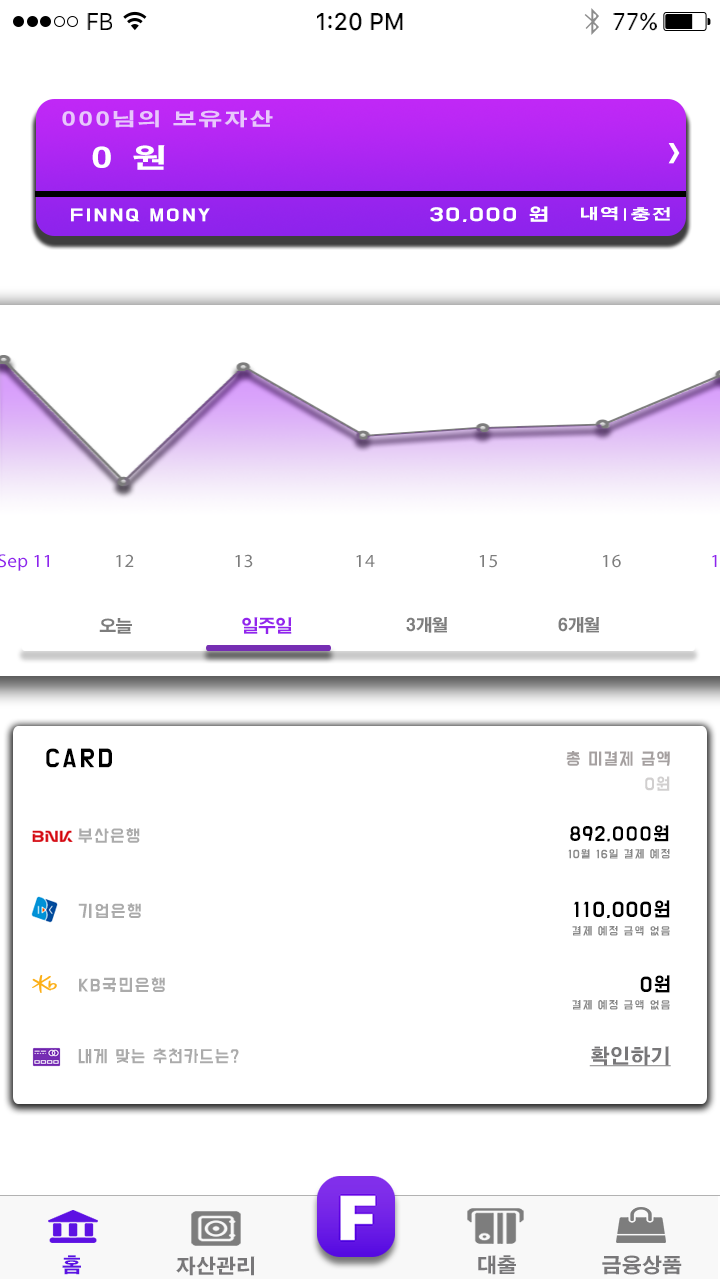
<style>
.page{position:relative;width:720px;height:1280px;background:#ffffff}
.page>*{position:absolute;margin:0}
.t1{font:24px "SFUIText-Regular";letter-spacing:-0.025em;color:#000000;scale:0.96 1}
.t2{font:24px "SFUIText-Medium";color:#000000;scale:0.96 1}
.t3{font:24px "SFUIText-Regular";color:#000000;scale:0.96 1}
.t4{font:18px "H2gtrE";letter-spacing:0.1em;color:#e9c6fc;scale:1.31 1}
.t5{font:27px "H2gtrE";letter-spacing:0.1em;color:#ffffff;scale:1.31 1}
.t6{font:22.2px "BMDoHyeon";letter-spacing:0.1em;color:#ffffff;scale:1.31 1}
.t7{font:15px "BMDoHyeon";letter-spacing:0.1em;color:#ffffff;scale:1.3 1}
.t8{font:16px "BMDoHyeon";letter-spacing:0.1em;color:#ffffff;scale:1.31 1}
.t9{font:14.5px "H2gtrE";letter-spacing:0.1em;color:#ffffff;scale:1.35 1}
.t10{font:18.5px "MyriadPro-Regular";letter-spacing:0.01em;color:#9023ed;scale:1.05 1}
.t11{font:18.5px "MyriadPro-Regular";letter-spacing:0.01em;color:#7d7d7d;scale:1.05 1}
.t12{font:18.5px "MyriadPro-Regular";letter-spacing:0.025em;color:#7d7d7d;scale:1.05 1}
.t13{font:17.9px "H2gtrE";letter-spacing:-0.05em;color:#9324ed}
.t14{font:17px "H2gtrE";letter-spacing:-0.05em;color:#7d7d7d}
.t15{font:22px "BMDoHyeon";letter-spacing:0.1em;color:#000000}
.t16{font:15px/25px "BMDoHyeon";letter-spacing:0.1em;color:#a5a0a0}
.t17{font:15px/25px "BMDoHyeon";letter-spacing:0.1em;color:#d1cfcf}
.t18{font:15px "BMDoHyeon";letter-spacing:0.1em;color:#ababab}
.t19{font:17px "BMDoHyeon";letter-spacing:0.1em;color:#000000}
.t20{font:10px "BMDoHyeon";letter-spacing:0.1em;color:#898989}
.t21{font:18px "BMDoHyeon";letter-spacing:0.1em;color:#000000}
.t22{font:20px "H2gtrE";letter-spacing:0.01em;color:#787779;text-decoration:underline}
.t23{font:20px "H2gtrE";letter-spacing:0.01em;color:#5d11e3}
.t24{font:20px "H2gtrE";letter-spacing:0.01em;color:#787779}
</style>
<div class="page">
<p class="t1" style="left:87px;top:13px;width:25px;height:17px">FB</p>
<p class="t2" style="left:317px;top:12px;width:86px;height:19px">1:20 PM</p>
<p class="t3" style="left:613px;top:12px;width:44px;height:19px">77%</p>
<p class="t4" style="left:62px;top:110px;width:211px;height:18px">000님의 보유자산</p>
<p class="t5" style="left:92px;top:145px;width:73px;height:25px">0 원</p>
<p class="t6" style="left:668px;top:143px;width:12px;height:21px">&gt;</p>
<p class="t7" style="left:71px;top:208px;width:139px;height:14px">FINNQ MONY</p>
<p class="t8" style="left:430px;top:206px;width:118px;height:16px">30,000 원</p>
<p class="t9" style="left:581px;top:206px;width:37px;height:15px">내역</p>
<p class="t9" style="left:631px;top:207px;width:39px;height:14px">충전</p>
<p class="t10" style="left:0px;top:554px;width:49px;height:17px">Sep 11</p>
<p class="t11" style="left:116px;top:554px;width:18px;height:13px">12</p>
<p class="t11" style="left:235px;top:554px;width:18px;height:14px">13</p>
<p class="t12" style="left:356px;top:555px;width:19px;height:12px">14</p>
<p class="t12" style="left:479px;top:555px;width:18px;height:13px">15</p>
<p class="t12" style="left:603px;top:554px;width:18px;height:14px">16</p>
<p class="t13" style="left:242px;top:617px;width:50px;height:17px">일주일</p>
<p class="t14" style="left:406px;top:617px;width:41px;height:16px">3개월</p>
<p class="t14" style="left:558px;top:617px;width:41px;height:16px">6개월</p>
<p class="t14" style="left:99px;top:618px;width:33px;height:16px">오늘</p>
<p class="t15" style="left:46px;top:748px;width:66px;height:20px">CARD</p>
<p class="t16" style="left:566px;top:751px;width:104px;height:40px">총 미결제 금액   <br>    <span class="t17">0원</span></p>
<p class="t18" style="left:78px;top:828px;width:62px;height:15px">부산은행</p>
<p class="t19" style="left:570px;top:825px;width:99px;height:17px">892,000원</p>
<p class="t20" style="left:568px;top:849px;width:102px;height:10px">10월 16일 결제 예정</p>
<p class="t18" style="left:78px;top:903px;width:63px;height:15px">기업은행</p>
<p class="t21" style="left:573px;top:900px;width:97px;height:18px">110,000원</p>
<p class="t20" style="left:572px;top:926px;width:98px;height:10px">결제 예정 금액 없음</p>
<p class="t18" style="left:79px;top:977px;width:86px;height:15px">KB국민은행</p>
<p class="t21" style="left:640px;top:975px;width:30px;height:18px">0원</p>
<p class="t20" style="left:572px;top:1000px;width:98px;height:10px">결제 예정 금액 없음</p>
<p class="t18" style="left:78px;top:1048px;width:161px;height:16px">내게 맞는 추천카드는?</p>
<p class="t22" style="left:589px;top:1046px;width:82px;height:21px">확인하기</p>
<p class="t23" style="left:62px;top:1255px;width:19px;height:20px">홈</p>
<p class="t24" style="left:176px;top:1256px;width:79px;height:20px">자산관리</p>
<p class="t24" style="left:478px;top:1255px;width:38px;height:20px">대출</p>
<p class="t24" style="left:602px;top:1255px;width:80px;height:20px">금융상품</p>
</div>
